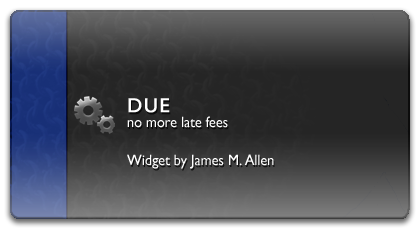
<style>
.page{position:relative;width:420px;height:230px}
.page>*{position:absolute;margin:0}
.t1{font:20px "GillSansMT";letter-spacing:0.05em;color:#ffffff;font-weight:bold}
.t2{font:15px "GillSansMT";color:#ffffff;scale:0.95 1}
</style>
<div class="page">
<p class="t1" style="left:128px;top:98px;width:42px;height:15px">DUE</p>
<p class="t2" style="left:127px;top:116px;width:101px;height:12px">no more late fees</p>
<p class="t2" style="left:127px;top:154px;width:147px;height:15px">Widget by James M. Allen</p>
</div>
